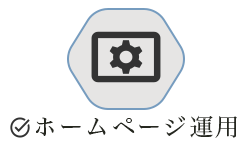
<style>
.page{position:relative;width:245px;height:147px;background:#ffffff}
.page>*{position:absolute;margin:0}
.t1{font:24px "HiraMinPro-W3";letter-spacing:0.08em;color:#25271f}
</style>
<div class="page">
<p class="t1" style="left:36px;top:115px;width:201px;height:23px">ホームページ運用</p>
</div>
